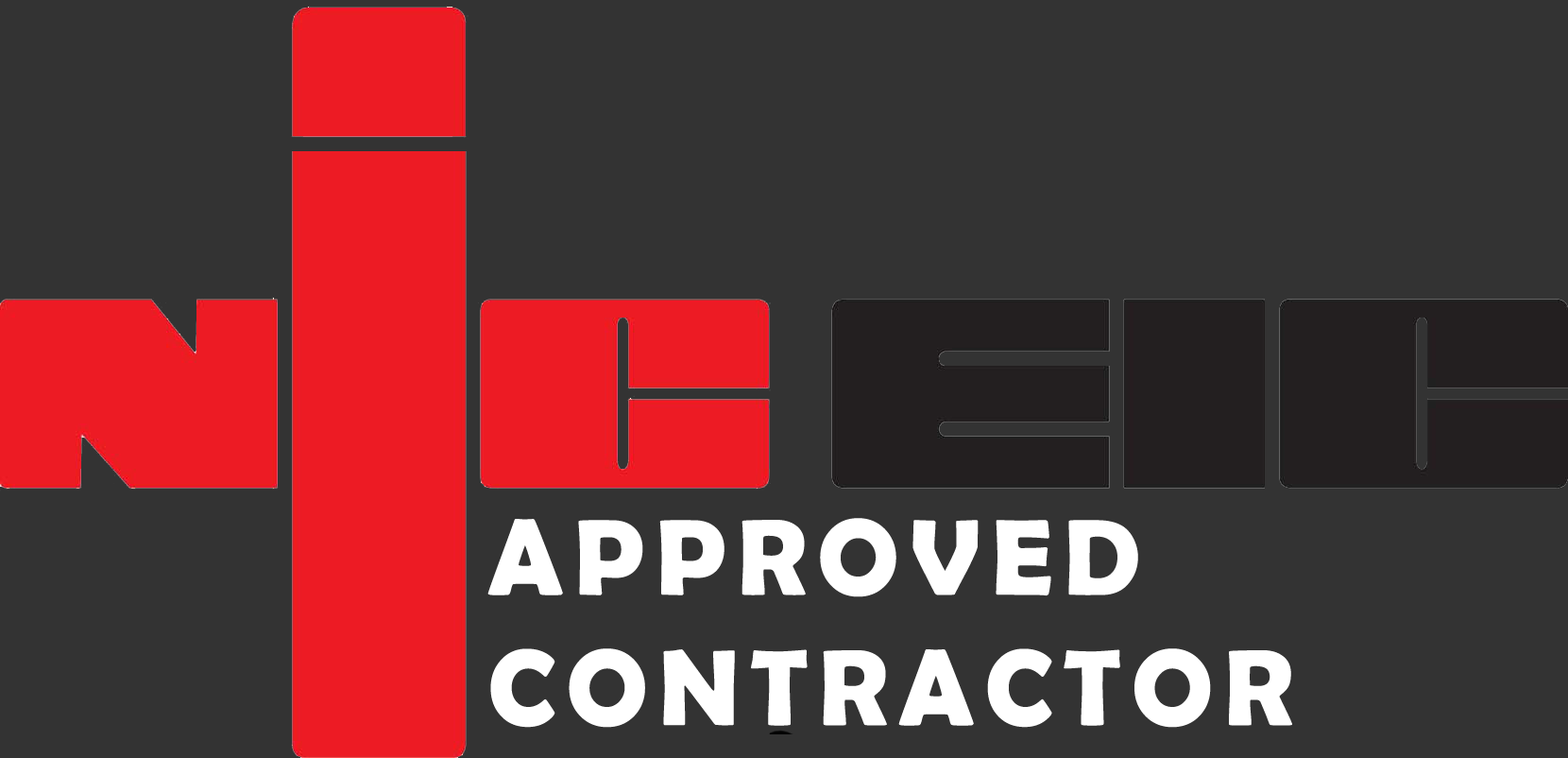
<style>
.page{position:relative;width:1568px;height:758px;background:#333333}
.page>*{position:absolute;margin:0}
.t1{font:108.6px "BerlinSansFBDemi-Bold";letter-spacing:0.1em;color:#ffffff}
</style>
<div class="page">
<p class="t1" style="left:487px;top:518px;width:805px;height:209px">APPROVED<br>CONTRACTOR</p>
</div>
